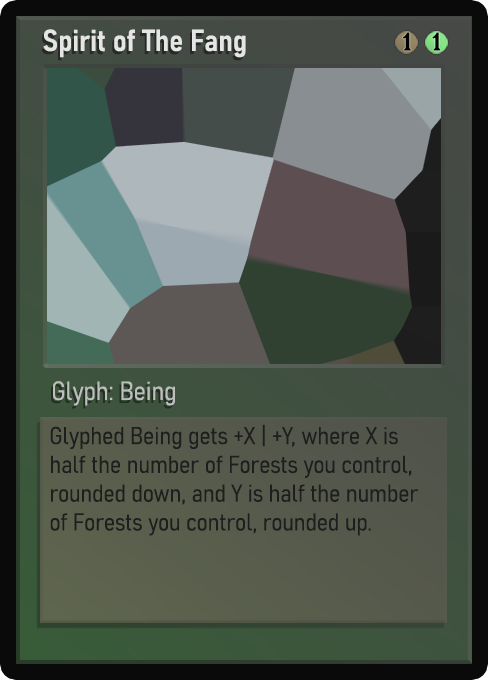
<style>
.page{position:relative;width:488px;height:680px}
.page>*{position:absolute;margin:0}
.t1{font:30px "Bahnschrift-SemiBoldSemiCondensed";color:#f2f2f2;font-weight:bold}
.t2{font:25px "WTRRoycroft";color:#000000;font-weight:bold;scale:1.09 1}
.t3{font:26px "Bahnschrift-LightSemiCondensed";color:#c8c8c8;font-weight:bold}
.t4{font:24px "Bahnschrift-LightSemiCondensed";color:#1e1e1e;font-weight:bold}
</style>
<div class="page">
<p class="t1" style="left:43px;top:29px;width:203px;height:29px;opacity:0.9">Spirit of The Fang</p>
<p class="t2" style="left:403px;top:32px;width:8px;height:19px">1</p>
<p class="t2" style="left:432px;top:32px;width:9px;height:19px">1</p>
<p class="t3" style="left:53px;top:381px;width:122px;height:25px;opacity:0.9">Glyph: Being</p>
<p class="t4" style="left:50px;top:424px;width:368px;height:112px">Glyphed Being gets +X | +Y, where X is half the number of Forests you control, rounded down, and Y is half the number of Forests you control, rounded up.</p>
</div>
